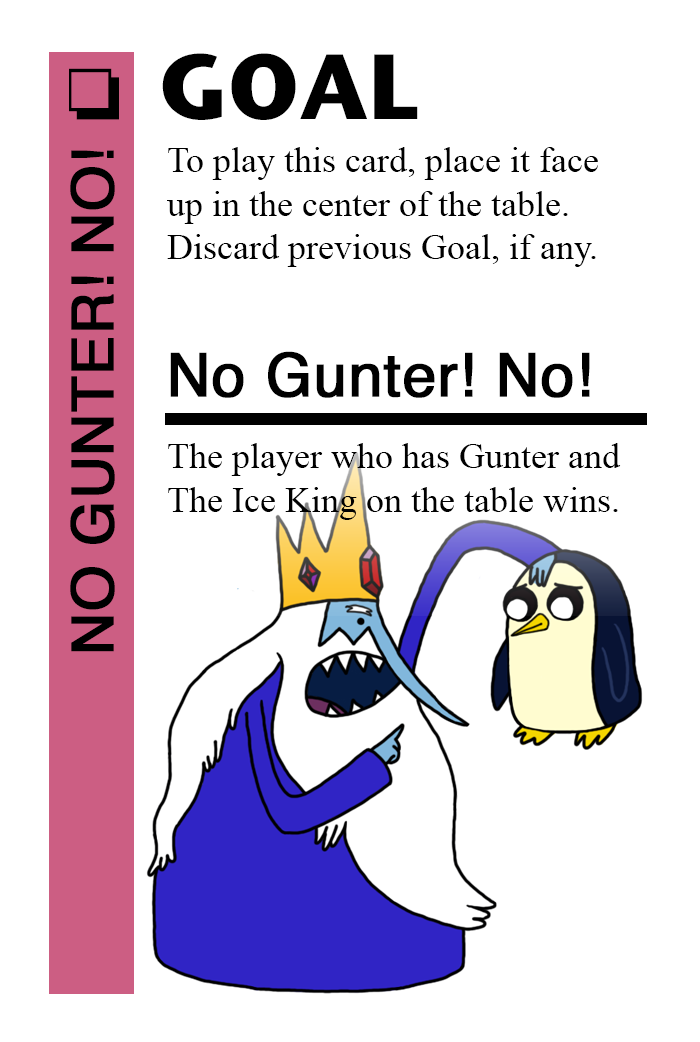
<style>
.page{position:relative;width:700px;height:1042px;background:#ffffff}
.page>*{position:absolute;margin:0}
.t1{font:92px "StoneSansITC-Bold";color:#000000}
.t2{font:72px "MS-Gothic";color:#000000}
.t3{font:58px "Helvetica";color:#000000;font-weight:bold}
.t4{font:36px "TimesNewRomanPSMT";color:#000000}
.t5{font:60px "Helvetica";color:#000000;font-weight:bold}
</style>
<div class="page">
<p class="t1" style="left:162px;top:53px;width:256px;height:67px">GOAL</p>
<p class="t2" style="left:69px;top:68px;width:50px;height:52px">❏</p>
<p class="t3" style="left:70px;top:150px;width:45px;height:502px;rotate:-90deg">NO GUNTER! NO!</p>
<p class="t4" style="left:167px;top:147px;width:431px;height:120px">To play this card, place it face<br>up in the center of the table.<br>Discard previous Goal, if any.</p>
<p class="t5" style="left:170px;top:351px;width:420px;height:47px">No Gunter! No!</p>
<p class="t4" style="left:168px;top:443px;width:453px;height:77px">The player who has Gunter and<br>The Ice King on the table wins.</p>
</div>
